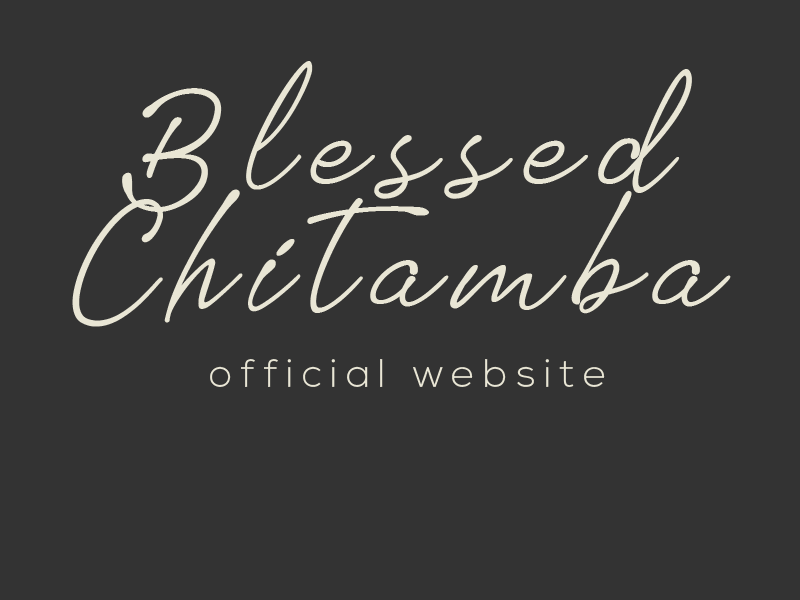
<style>
.page{position:relative;width:800px;height:600px;background:#333333}
.page>*{position:absolute;margin:0}
.t1{font:100px "Tomatoes";letter-spacing:0.2em;color:#e9e6d5}
.t2{font:40px "NexaLight";letter-spacing:0.2em;color:#e9e6d5}
</style>
<div class="page">
<p class="t1" style="left:72px;top:61px;width:659px;height:266px;text-align:center">Blessed Chitamba</p>
<p class="t2" style="left:210px;top:359px;width:395px;height:28px">official website</p>
</div>
